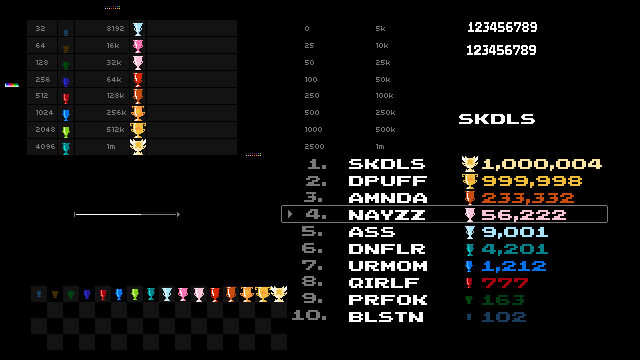
<style>
.page{position:relative;width:640px;height:360px;background:#000000}
.page>*{position:absolute;margin:0}
.t1{font:10px/16.8px "04b03-Ekstended";color:#787878}
.t2{font:14px "balloon_fight_font";color:#fcfcfc;scale:0.5 1}
.t3{font:14px "balloon_fight_font";color:#787878}
.t4{font:14px/17px "balloon_fight_font";color:#fcfcfc}
.t5{font:14px/17px "balloon_fight_font";color:#fce4a0}
.t6{font:14px/17px "balloon_fight_font";color:#f0bc3c}
.t7{font:14px/17px "balloon_fight_font";color:#c84c0c}
.t8{font:14px/17px "balloon_fight_font";color:#fcc4d8}
.t9{font:14px/17px "balloon_fight_font";color:#a8e4fc}
.t10{font:14px/17px "balloon_fight_font";color:#008088}
.t11{font:14px/17px "balloon_fight_font";color:#0070ec}
.t12{font:14px/17px "balloon_fight_font";color:#a80010}
.t13{font:14px/17px "balloon_fight_font";color:#003c14}
.t14{font:14px/17px "balloon_fight_font";color:#183c5c}
</style>
<div class="page">
<p class="t1" style="left:36px;top:26px;width:19px;height:123px">32<br>64<br>128<br>256<br>512<br>1024<br>2048<br>4096</p>
<p class="t1" style="left:107px;top:26px;width:19px;height:123px">8192<br>16k<br>32k<br>64k<br>128k<br>256k<br>512k<br>1m</p>
<p class="t1" style="left:305px;top:26px;width:19px;height:123px">0<br>25<br>50<br>100<br>250<br>500<br>1000<br>2500</p>
<p class="t1" style="left:376px;top:26px;width:19px;height:123px">5k<br>10k<br>25k<br>50k<br>100k<br>250k<br>500k<br>1m</p>
<p class="t2" style="left:468px;top:22px;width:69px;height:10px">123456789</p>
<p class="t3" style="left:292px;top:159px;width:34px;height:161px;text-align:right">1.<br>2.<br>3. <br>4.<br>5. <br>6. <br>7. <br>8. <br>9. <br>10.</p>
<p class="t4" style="left:349px;top:159px;width:78px;height:163px">SKDLS<br>DPUFF<br>AMNDA<br>NAYZZ<br>ASS<br>DNFLR<br>URMOM<br>QIRLF<br>PRFOK<br>BLSTN</p>
<p class="t5" style="left:482px;top:159px;width:120px;height:163px">1,000,004<br><span class="t6">999,998<br></span><span class="t7">233,332<br></span><span class="t8">56,222<br></span><span class="t9">9,001<br></span><span class="t10">4,201<br></span><span class="t11">1,212<br></span><span class="t12">777<br></span><span class="t13">163<br></span><span class="t14">102</span></p>
</div>
